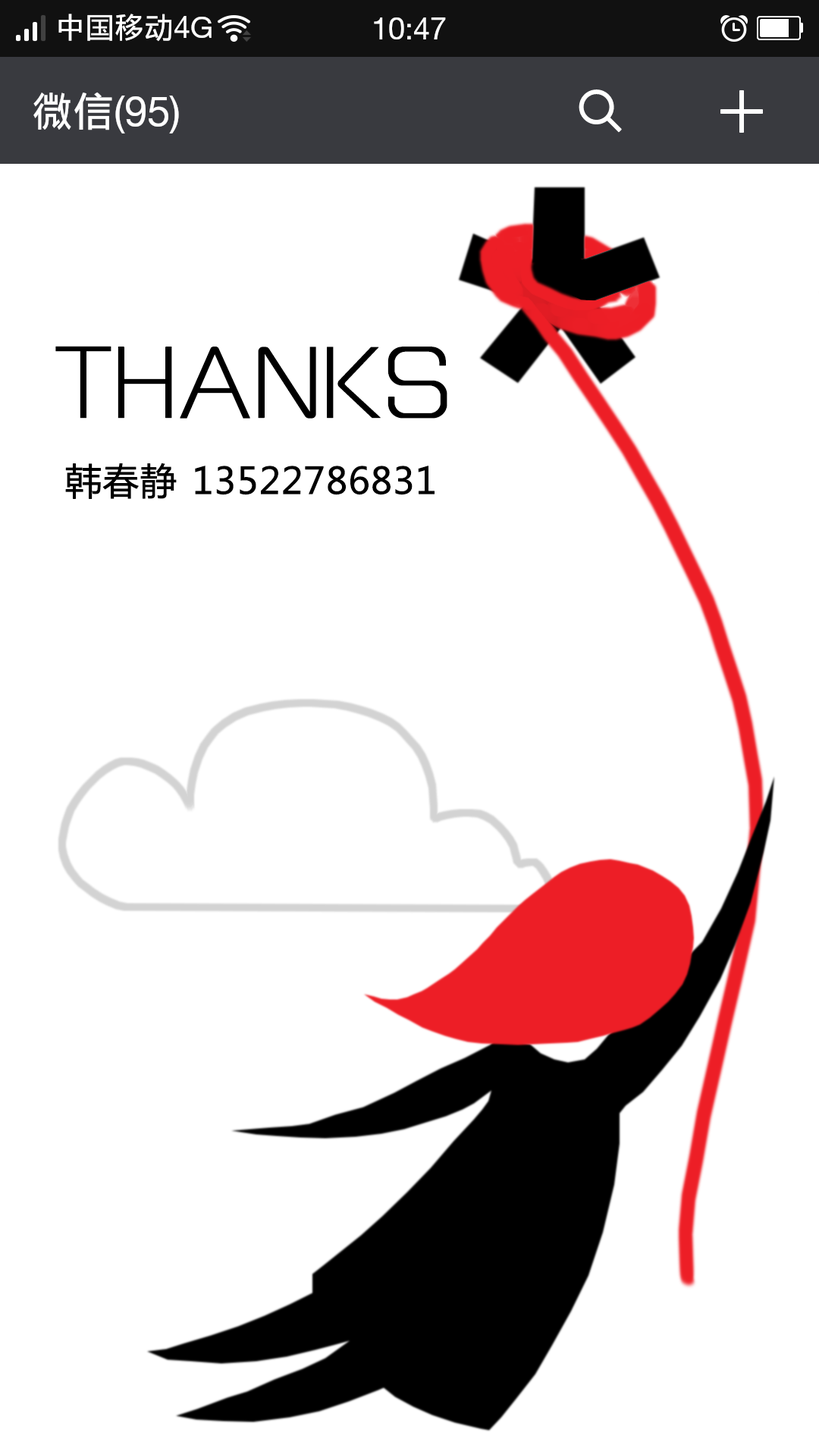
<style>
.page{position:relative;width:819px;height:1456px;background:#ffffff}
.page>*{position:absolute;margin:0}
.t1{font:75.1px "MFLangQian_Noncommercial-Light";color:#000000;font-weight:bold}
.t2{font:36.4px "MicrosoftYaHei";color:#000000;font-weight:bold}
</style>
<div class="page">
<p class="t1" style="left:55px;top:346px;width:392px;height:73px">THANKS</p>
<p class="t2" style="left:65px;top:463px;width:370px;height:36px">韩春静 13522786831</p>
</div>
